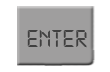
<style>
.page{position:relative;width:110px;height:72px;background:#9f9e9e}
.page>*{position:absolute;margin:0}
.t1{font:26px "DS-Digital";letter-spacing:-0.025em;color:#404040}
</style>
<div class="page">
<p class="t1" style="left:27px;top:30px;width:60px;height:18px">Enter</p>
</div>
